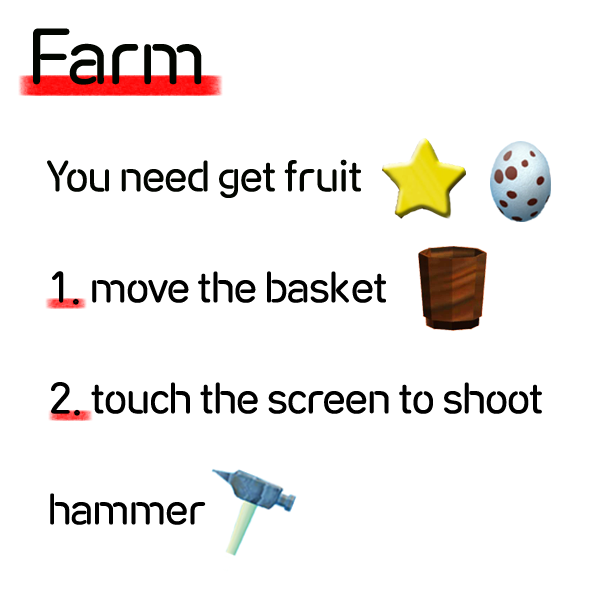
<style>
.page{position:relative;width:600px;height:600px;background:#ffffff}
.page>*{position:absolute;margin:0}
.t1{font:72px "RixNeonSignB";letter-spacing:-0.05em;color:#020500}
.t2{font:40px "RixNeonSignB";letter-spacing:-0.05em;color:#020500}
.t3{font:40px "RixNeonSignB";letter-spacing:-0.05em;color:#000000}
</style>
<div class="page">
<p class="t1" style="left:33px;top:28px;width:169px;height:57px">Farm</p>
<p class="t2" style="left:47px;top:159px;width:314px;height:39px">You need get fruit</p>
<p class="t3" style="left:52px;top:271px;width:334px;height:34px">1. move the basket</p>
<p class="t3" style="left:51px;top:382px;width:491px;height:34px">2. touch the screen to shoot</p>
<p class="t3" style="left:50px;top:493px;width:156px;height:32px">hammer</p>
</div>
